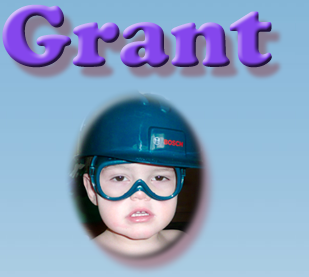
<style>
.page{position:relative;width:309px;height:277px}
.page>*{position:absolute;margin:0}
.t1{font:90px "CooperBlack"}
</style>
<div class="page">
<p class="t1" style="left:2px;top:4px;width:270px;height:64px">Grant</p>
</div>
